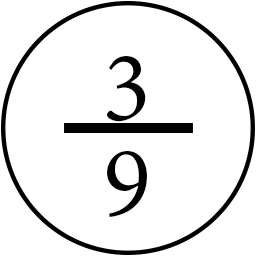
<style>
.page{position:relative;width:256px;height:256px;background:#ffffff}
.page>*{position:absolute;margin:0}
.t1{font:110px/95px "AdobeDevanagari-Regular";letter-spacing:0.01em;color:#000000}
</style>
<div class="page">
<p class="t1" style="left:107px;top:56px;width:40px;height:161px;text-align:center">3<br>9</p>
</div>
